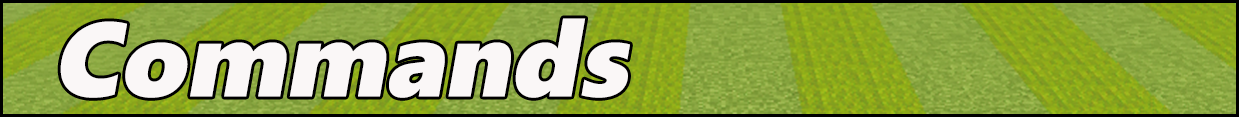
<style>
.page{position:relative;width:1239px;height:117px}
.page>*{position:absolute;margin:0}
.t1{font:105px "SegoeUIBlack";color:#faf7f7;font-style:italic}
</style>
<div class="page">
<p class="t1" style="left:60px;top:18px;width:570px;height:80px">Commands</p>
</div>
